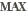
<style>
.page{position:relative;width:27px;height:13px;background:#ffffff}
.page>*{position:absolute;margin:0}
.t1{font:12px "RyuminPro-ExBold";letter-spacing:-0.12em;color:#4b4843}
</style>
<div class="page">
<p class="t1" style="left:0px;top:2px;width:27px;height:9px">MAX</p>
</div>
